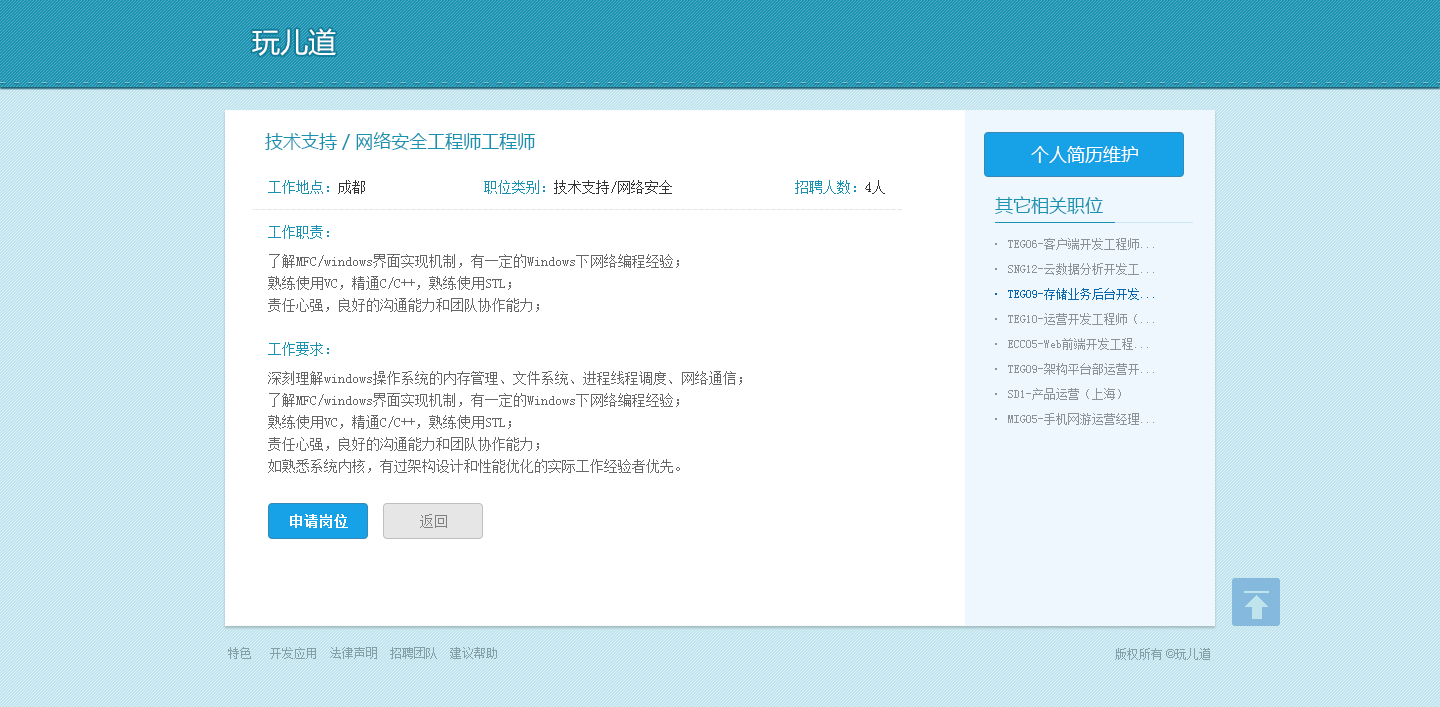
<style>
.page{position:relative;width:1440px;height:707px;background:#ffffff}
.page>*{position:absolute;margin:0}
.t1{font:28px "MicrosoftYaHei";color:#ffffff}
.t2{font:18px "MicrosoftYaHei";color:#1992b1}
.t3{font:18px "MicrosoftYaHei";color:#ffffff}
.t4{font:14px "SimSun";color:#1992b1}
.t5{font:14px "SimSun";color:#333333}
.t6{font:12px/25px "SimSun";color:#8e9397}
.t7{font:12px/25px "SimSun";color:#0967af}
.t8{font:14px/22px "SimSun";color:#666666}
.t9{font:14px "SimSun";color:#ffffff;font-weight:bold}
.t10{font:14px "SimSun";color:#808080}
.t11{font:12px "SimSun";color:#849fa6}
.t12{font:12px "ArialMT";color:#849fa6}
</style>
<div class="page">
<p class="t1" style="left:252px;top:28px;width:84px;height:28px">玩儿道</p>
<p class="t2" style="left:265px;top:132px;width:270px;height:18px">技术支持 / 网络安全工程师工程师</p>
<p class="t3" style="left:1031px;top:146px;width:107px;height:17px">个人简历维护</p>
<p class="t4" style="left:268px;top:180px;width:97px;height:14px">工作地点：<span class="t5">成都</span></p>
<p class="t5" style="left:484px;top:180px;width:188px;height:14px"><span class="t4">职位类别：</span>技术支持/网络安全</p>
<p class="t4" style="left:795px;top:180px;width:90px;height:14px">招聘人数：<span class="t5">4人</span></p>
<p class="t2" style="left:995px;top:196px;width:108px;height:18px">其它相关职位</p>
<p class="t4" style="left:268px;top:225px;width:61px;height:14px">工作职责：</p>
<p class="t6" style="left:995px;top:238px;width:159px;height:187px">· TEG06-客户端开发工程师...<br>· SNG12-云数据分析开发工...<br><span class="t7">· TEG09-存储业务后台开发...<br></span>· TEG10-运营开发工程师（...<br>· ECC05-Web前端开发工程...<br>· TEG09-架构平台部运营开...<br>· SD1-产品运营（上海）<br>· MIG05-手机网游运营经理...</p>
<p class="t8" style="left:268px;top:254px;width:411px;height:58px">了解MFC/windows界面实现机制，有一定的Windows下网络编程经验；<br>熟练使用VC，精通C/C++，熟练使用STL；<br>责任心强，良好的沟通能力和团队协作能力；</p>
<p class="t4" style="left:268px;top:342px;width:61px;height:14px">工作要求：</p>
<p class="t8" style="left:268px;top:371px;width:474px;height:102px">深刻理解windows操作系统的内存管理、文件系统、进程线程调度、网络通信；<br>了解MFC/windows界面实现机制，有一定的Windows下网络编程经验；<br>熟练使用VC，精通C/C++，熟练使用STL；<br>责任心强，良好的沟通能力和团队协作能力；<br>如熟悉系统内核，有过架构设计和性能优化的实际工作经验者优先。</p>
<p class="t9" style="left:290px;top:514px;width:58px;height:14px">申请岗位</p>
<p class="t10" style="left:420px;top:514px;width:27px;height:14px">返回</p>
<p class="t11" style="left:228px;top:647px;width:269px;height:12px">特色   开发应用  法律声明  招聘团队  建议帮助</p>
<p class="t11" style="left:1115px;top:648px;width:95px;height:12px">版权所有<span class="t12"> ©</span>玩儿道</p>
</div>
